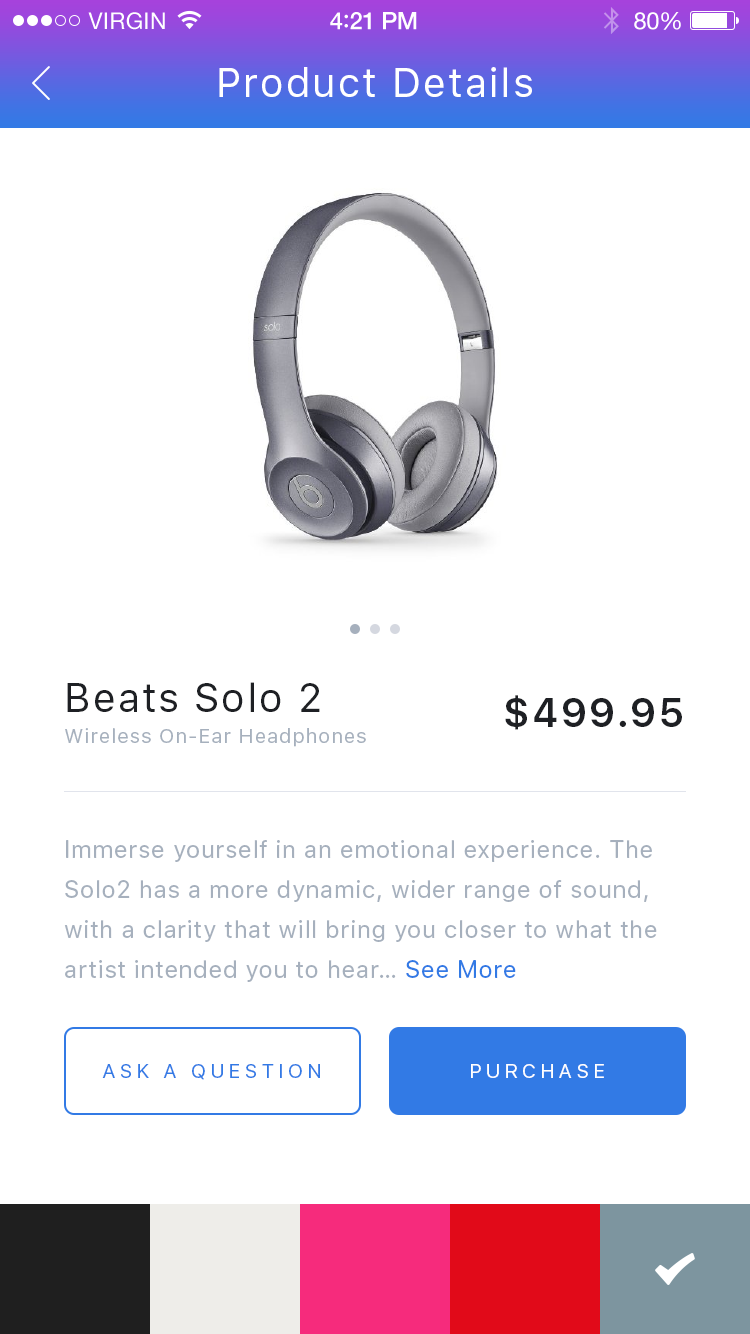
<style>
.page{position:relative;width:750px;height:1334px;background:#ffffff}
.page>*{position:absolute;margin:0}
.t1{font:40px "SFUIText-Regular";letter-spacing:0.05em;color:#ffffff}
.t2{font:40px "SFUIText-Regular";letter-spacing:0.05em;color:#1e2024}
.t3{font:40px "SFUIText-Semibold";letter-spacing:0.05em;color:#1e2024}
.t4{font:20px "SFUIText-Regular";letter-spacing:0.05em;color:#a6b0bd}
.t5{font:24px/40px "SFUIText-Regular";letter-spacing:0.025em;color:#a6b0bd}
.t6{font:24px/40px "SFUIText-Regular";letter-spacing:0.025em;color:#327ae5}
.t7{font:20px "SFUIText-Regular";letter-spacing:0.2em;color:#327ae5;text-transform:uppercase}
.t8{font:20px "SFUIText-Regular";letter-spacing:0.2em;color:#ffffff;text-transform:uppercase}
</style>
<div class="page">
<p class="t1" style="left:219px;top:67px;width:313px;height:30px">Product Details</p>
<p class="t2" style="left:67px;top:682px;width:253px;height:30px">Beats Solo 2</p>
<p class="t3" style="left:505px;top:695px;width:177px;height:35px">$499.95</p>
<p class="t4" style="left:65px;top:728px;width:301px;height:19px">Wireless On-Ear Headphones</p>
<p class="t5" style="left:64px;top:840px;width:593px;height:142px">Immerse yourself in an emotional experience. The Solo2 has a more dynamic, wider range of sound, with a clarity that will bring you closer to what the artist intended you to hear… <span class="t6">See More</span></p>
<p class="t7" style="left:102px;top:1064px;width:218px;height:16px">ask a question</p>
<p class="t8" style="left:471px;top:1064px;width:133px;height:14px">purchase</p>
</div>
